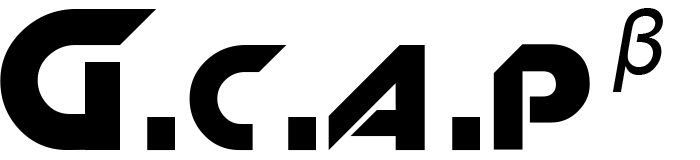
<style>
.page{position:relative;width:700px;height:160px;background:#ffffff}
.page>*{position:absolute;margin:0}
.t1{font:200px "Slant";color:#000000}
.t2{font:214.9px "Slant";color:#000000}
.t3{font:90px "ArialMT";color:#000000;font-style:italic}
</style>
<div class="page">
<p class="t1" style="left:0px;top:9px;width:590px;height:142px"><span class="t2">G</span>.c.a.p</p>
<p class="t3" style="left:612px;top:8px;width:51px;height:84px">β</p>
</div>
